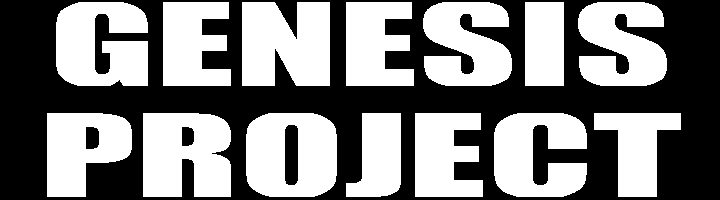
<style>
.page{position:relative;width:720px;height:200px;background:#000000}
.page>*{position:absolute;margin:0}
.t1{font:105.6px/111px "Impact";color:#ffffff;scale:1.82 1}
</style>
<div class="page">
<p class="t1" style="left:47px;top:0px;width:634px;height:199px;text-align:center">GENESIS<br>PROJECT</p>
</div>
